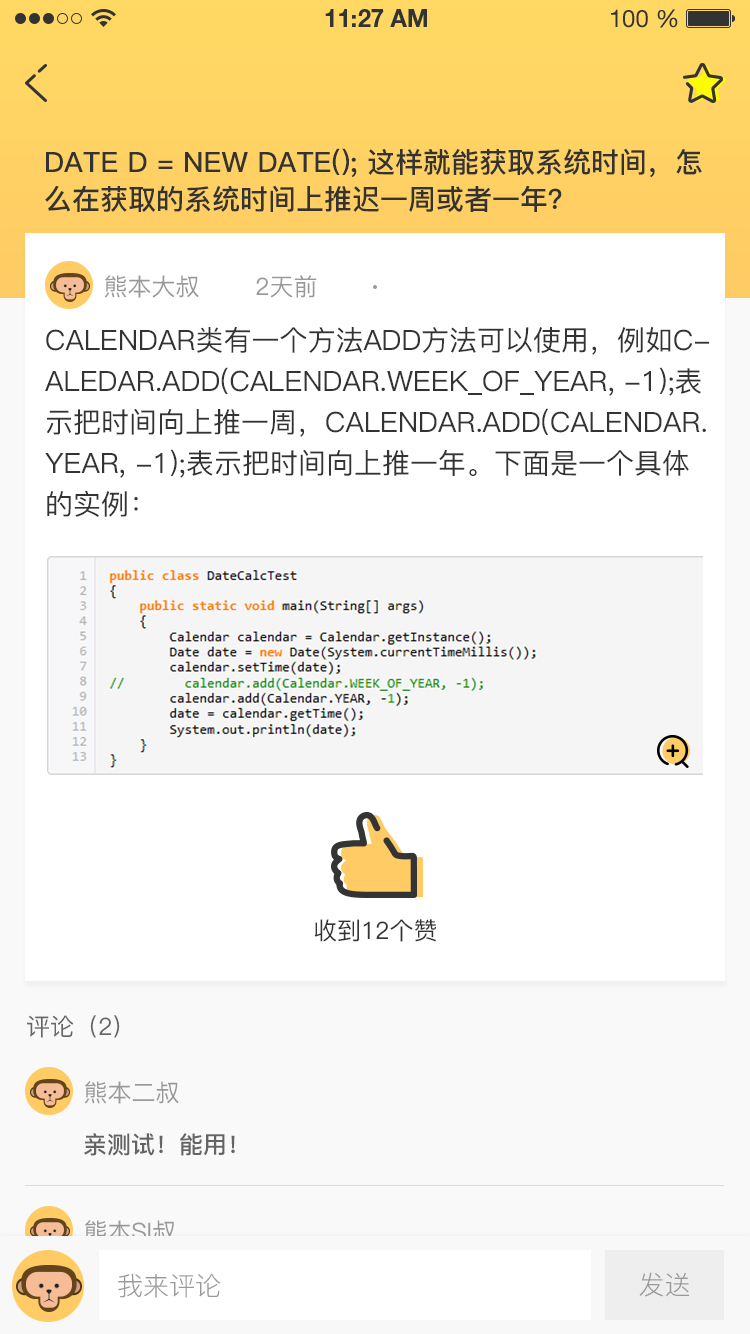
<style>
.page{position:relative;width:750px;height:1334px;background:#ffffff}
.page>*{position:absolute;margin:0}
.t1{font:28px/37px "PingFang-SC-Bold";color:#333333;text-transform:uppercase}
.t2{font:24px "PingFang-SC-Medium";color:#999999;text-transform:uppercase}
.t3{font:28px/41px "PingFang-SC-Medium";color:#333333;text-transform:uppercase}
.t4{font:24px "PingFang-SC-Medium";color:#333333;text-transform:uppercase}
.t5{font:24px "PingFang-SC-Medium";color:#666666;text-transform:uppercase}
.t6{font:24px "PingFang-SC-Bold";color:#646464;text-transform:uppercase}
.t7{font:26px "PingFang-SC-Regular";color:#999999;text-transform:uppercase}
</style>
<div class="page">
<p class="t1" style="left:45px;top:148px;width:657px;height:64px">Date d = new Date(); 这样就能获取系统时间，怎<br>么在获取的系统时间上推迟一周或者一年？</p>
<p class="t2" style="left:104px;top:275px;width:213px;height:23px">熊本大叔       2天前</p>
<p class="t3" style="left:45px;top:327px;width:664px;height:190px">Calendar类有一个方法add方法可以使用，例如c-<br>aledar.add(Calendar.WEEK_OF_YEAR, -1);表<br>示把时间向上推一周，calendar.add(Calendar.<br>YEAR, -1);表示把时间向上推一年。下面是一个具体<br>的实例：</p>
<p class="t4" style="left:314px;top:919px;width:122px;height:23px">收到12个赞</p>
<p class="t5" style="left:27px;top:1015px;width:93px;height:23px">评论（2）</p>
<p class="t2" style="left:84px;top:1081px;width:95px;height:23px">熊本二叔</p>
<p class="t6" style="left:84px;top:1133px;width:151px;height:23px">亲测试！能用！</p>
<p class="t2" style="left:84px;top:1220px;width:91px;height:23px">熊本si叔</p>
<p class="t7" style="left:118px;top:1273px;width:103px;height:25px">我来评论</p>
<p class="t7" style="left:639px;top:1272px;width:51px;height:25px">发送</p>
</div>
